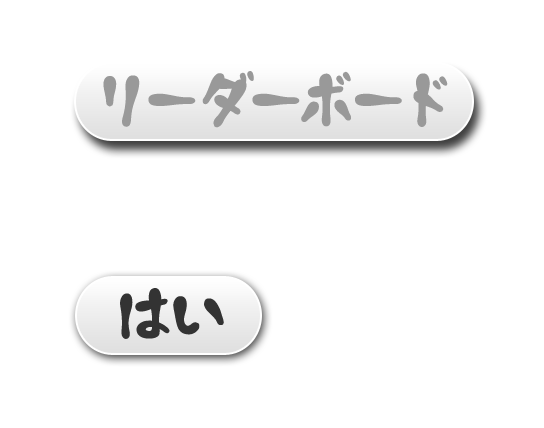
<style>
.page{position:relative;width:544px;height:428px;background:#ffffff}
.page>*{position:absolute;margin:0}
.t1{font:60px "Toneri";color:#999999}
.t2{font:60px "Toneri";color:#333333}
</style>
<div class="page">
<p class="t1" style="left:103px;top:71px;width:345px;height:57px">リーダーボード</p>
<p class="t2" style="left:120px;top:288px;width:104px;height:51px">はい</p>
</div>
